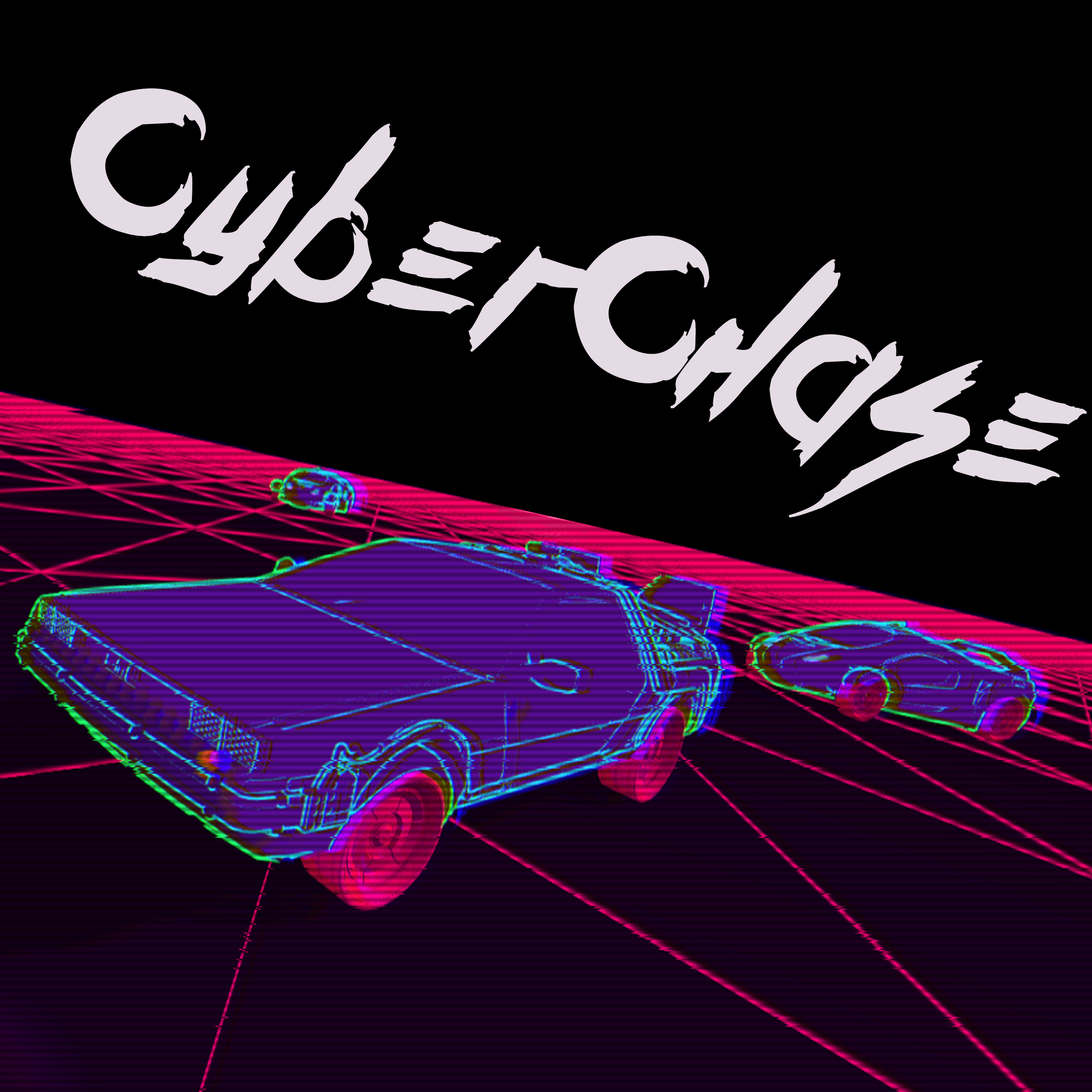
<style>
.page{position:relative;width:1092px;height:1092px;background:#000000}
.page>*{position:absolute;margin:0}
.t1{font:262.5px "KillTheNoise";color:#e5dbe4}
.t2{font:357px "KillTheNoise";color:#e5dbe4}
</style>
<div class="page">
<p class="t1" style="left:70px;top:88px;width:1017px;height:429px;rotate:16deg"><span class="t2">C</span>yber<span class="t2">C</span>Hase</p>
</div>
